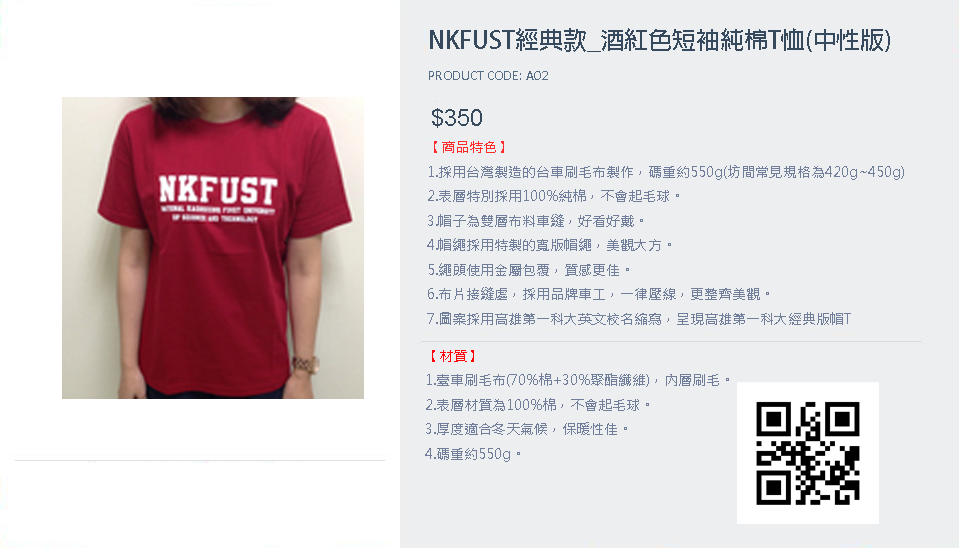
<style>
.page{position:relative;width:959px;height:548px;background:#edeef0}
.page>*{position:absolute;margin:0}
.t1{font:24px "AdobeFanHeitiStd-Bold";color:#37495d}
.t2{font:14px "Calibri";color:#566c84}
.t3{font:24px "ArialMT";color:#37495d}
.t4{font:14px "MicrosoftJhengHeiRegular";color:#717e9a}
.t5{font:14px "MicrosoftJhengHeiRegular";color:#ff2a2a}
.t6{font:14px "MicrosoftJhengHeiRegular";color:#ff020a}
</style>
<div class="page">
<p class="t1" style="left:430px;top:28px;width:460px;height:24px">NKFUST經典款_酒紅色短袖純棉T恤(中性版)</p>
<p class="t2" style="left:429px;top:71px;width:119px;height:9px">PRODUCT CODE: A02</p>
<p class="t3" style="left:432px;top:108px;width:50px;height:20px">$350</p>
<p class="t4" style="left:427px;top:141px;width:477px;height:184px"><span class="t5">【商品特色】<br></span>1.採用台灣製造的台車刷毛布製作，碼重約550g(坊間常見規格為420g~450g)<br>2.表層特別採用100%純棉，不會起毛球。<br>3.帽子為雙層布料車縫，好看好戴。<br>4.帽繩採用特製的寬版帽繩，美觀大方。<br>5.繩頭使用金屬包覆，質感更佳。<br>6.布片接縫處，採用品牌車工，一律壓線，更整齊美觀。<br>7.圖案採用高雄第一科大英文校名縮寫，呈現高雄第一科大經典版帽T</p>
<p class="t4" style="left:425px;top:350px;width:304px;height:112px"><span class="t6">【材質】<br></span>1.臺車刷毛布(70%棉+30%聚酯纖維)，內層刷毛。<br>2.表層材質為100%棉，不會起毛球。<br>3.厚度適合冬天氣候，保暖性佳。<br>4.碼重約550g。</p>
</div>
